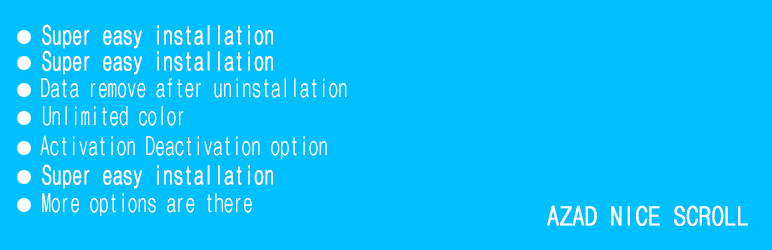
<style>
.page{position:relative;width:772px;height:250px;background:#00bfff}
.page>*{position:absolute;margin:0}
.t1{font:26.2px "DotumChe";color:#ffffff;font-weight:bold;scale:0.73 1}
.t2{font:26.2px "DotumChe";color:#ffffff;text-transform:uppercase;font-weight:bold;scale:0.73 1}
.t3{font:26.2px "DotumChe";color:#ffffff;scale:0.73 1}
.t4{font:26.2px "DotumChe";color:#ffffff;text-transform:uppercase;font-weight:bold;scale:0.92 1}
</style>
<div class="page">
<p class="t1" style="left:42px;top:24px;width:231px;height:25px"><span class="t2">S</span>uper easy installation</p>
<p class="t1" style="left:42px;top:50px;width:231px;height:25px"><span class="t2">S</span>uper easy installation</p>
<p class="t3" style="left:41px;top:78px;width:306px;height:20px">Data remove after uninstallation</p>
<p class="t3" style="left:43px;top:106px;width:141px;height:20px">Unlimited color</p>
<p class="t3" style="left:40px;top:135px;width:287px;height:24px">Activation Deactivation option</p>
<p class="t1" style="left:42px;top:164px;width:231px;height:25px"><span class="t2">S</span>uper easy installation</p>
<p class="t3" style="left:42px;top:193px;width:210px;height:23px">More options are there</p>
<p class="t4" style="left:547px;top:205px;width:201px;height:21px">AZAD NICE SCROLL</p>
</div>
